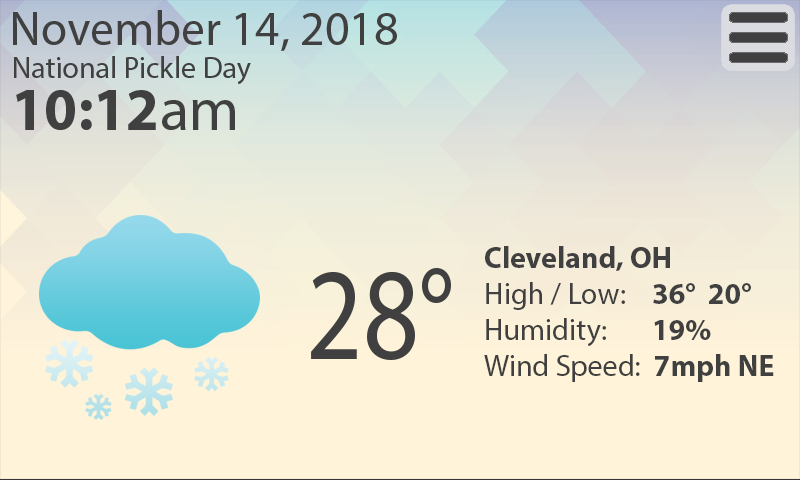
<style>
.page{position:relative;width:800px;height:480px;background:#fff3d9}
.page>*{position:absolute;margin:0}
.t1{font:30px "MyriadPro-Bold";color:#404040}
.t2{font:30px "MyriadPro-Regular";color:#404040}
</style>
<div class="page">
<p class="t1" style="left:484px;top:246px;width:290px;height:136px">Cleveland, OH<br><span class="t2">High / Low:    </span>36°  20°<br><span class="t2">Humidity:       </span>19%<br><span class="t2">Wind Speed:  </span>7mph NE</p>
</div>
